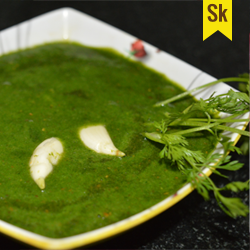
<style>
.page{position:relative;width:250px;height:250px}
.page>*{position:absolute;margin:0}
.t1{font:20px "Oswald-Regular";color:#603913;font-weight:bold}
</style>
<div class="page">
<p class="t1" style="left:207px;top:3px;width:21px;height:19px">Sk</p>
</div>
